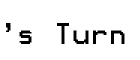
<style>
.page{position:relative;width:140px;height:60px;background:#ffffff}
.page>*{position:absolute;margin:0}
.t1{font:24px "Terminal";color:#000000}
</style>
<div class="page">
<p class="t1" style="left:6px;top:23px;width:119px;height:21px">‘s Turn</p>
</div>
